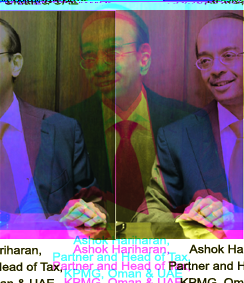
<style>
.page{position:relative;width:244px;height:283px}
.page>*{position:absolute;margin:0}
.t1{font:11.5px/16.7px "ArialMT";scale:1.09 1}
</style>
<div class="page">
<p class="t1" style="left:53px;top:234px;width:137px;height:45px;text-align:center">Ashok Hariharan, <br>Partner and Head of Tax, <br>KPMG, Oman &amp; UAE</p>
</div>
